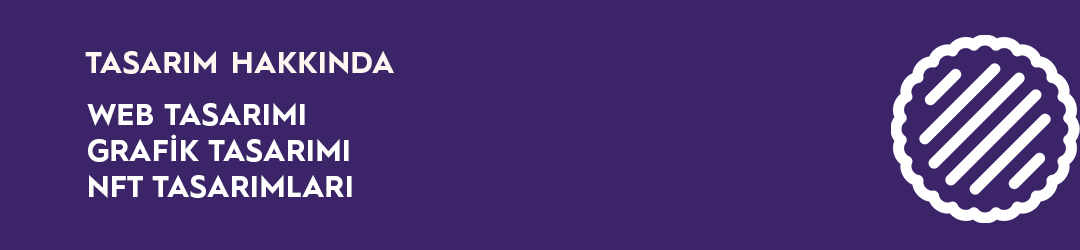
<style>
.page{position:relative;width:1080px;height:250px;background:#3b2468}
.page>*{position:absolute;margin:0}
.t1{font:30px "HurmeGeometricSans1-Bold";letter-spacing:0.015em;color:#fdf6f1;text-transform:uppercase}
.t2{font:30px "HurmeGeometricSans1-Bold";letter-spacing:0.015em;color:#ffffff;text-transform:uppercase}
</style>
<div class="page">
<p class="t1" style="left:85px;top:51px;width:309px;height:23px">TASARIM HAKKINDA</p>
<p class="t2" style="left:87px;top:103px;width:265px;height:95px">WEB TASARIMI <br>GRAFİK TASARIMI<br>NFT TASARIMLARI</p>
</div>
